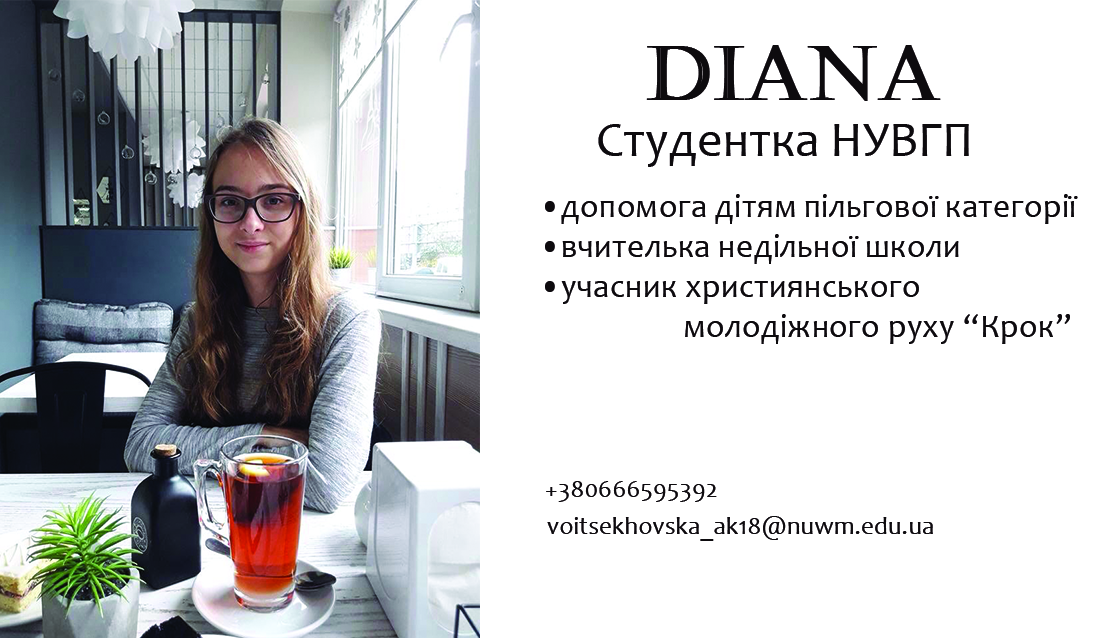
<style>
.page{position:relative;width:1110px;height:638px;background:#ffffff}
.page>*{position:absolute;margin:0}
.t1{font:75px "Castellar";color:#0d0b0e;text-transform:uppercase;font-weight:bold}
.t2{font:50px "Candara";color:#0d0b0e}
.t3{font:33.3px "Candara";letter-spacing:0.01em;color:#0d0b0e}
.t4{font:25px "Candara";letter-spacing:0.01em;color:#0d0b0e}
</style>
<div class="page">
<p class="t1" style="left:646px;top:45px;width:295px;height:56px">Diana</p>
<p class="t2" style="left:598px;top:124px;width:371px;height:43px">Студентка НУВГП</p>
<p class="t3" style="left:545px;top:194px;width:533px;height:150px;text-align:right">•допомога дітям пільгової категорії<br>•вчителька недільної школи<br>•учасник християнського <br>                   молодіжного руху “Крок”</p>
<p class="t4" style="left:546px;top:481px;width:171px;height:21px">+380666595392</p>
<p class="t4" style="left:547px;top:516px;width:386px;height:25px">voitsekhovska_ak18@nuwm.edu.ua</p>
</div>
